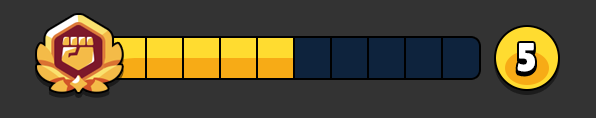
<style>
.page{position:relative;width:596px;height:118px;background:#333333}
.page>*{position:absolute;margin:0}
.t1{font:40px "LilitaOne";color:#ffffff;text-transform:uppercase}
</style>
<div class="page">
<p class="t1" style="left:517px;top:43px;width:18px;height:29px">5</p>
</div>
